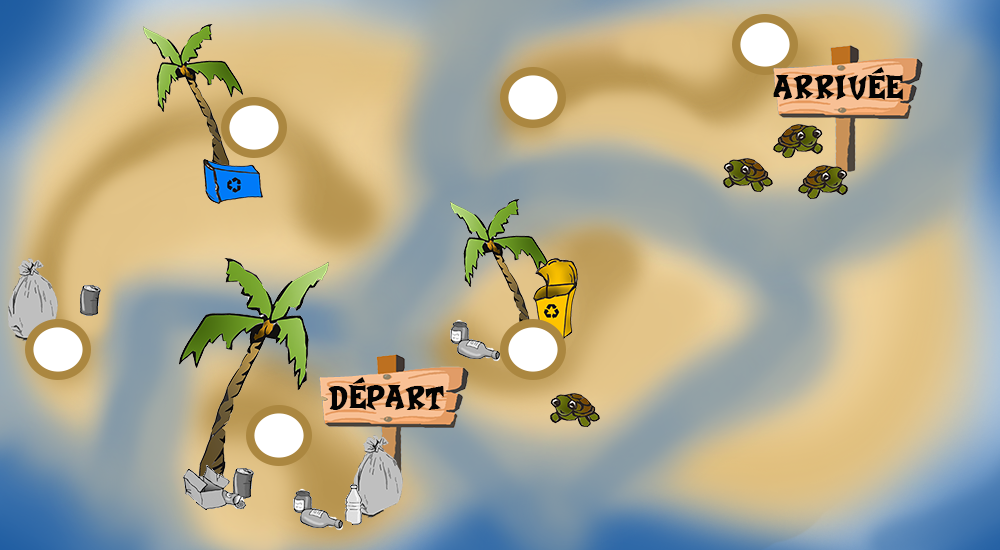
<style>
.page{position:relative;width:1000px;height:550px}
.page>*{position:absolute;margin:0}
.t1{font:48px "Crash-a-Like";color:#030303}
</style>
<div class="page">
<p class="t1" style="left:773px;top:67px;width:130px;height:33px">ARRIVée</p>
<p class="t1" style="left:328px;top:377px;width:116px;height:33px">Départ</p>
</div>
